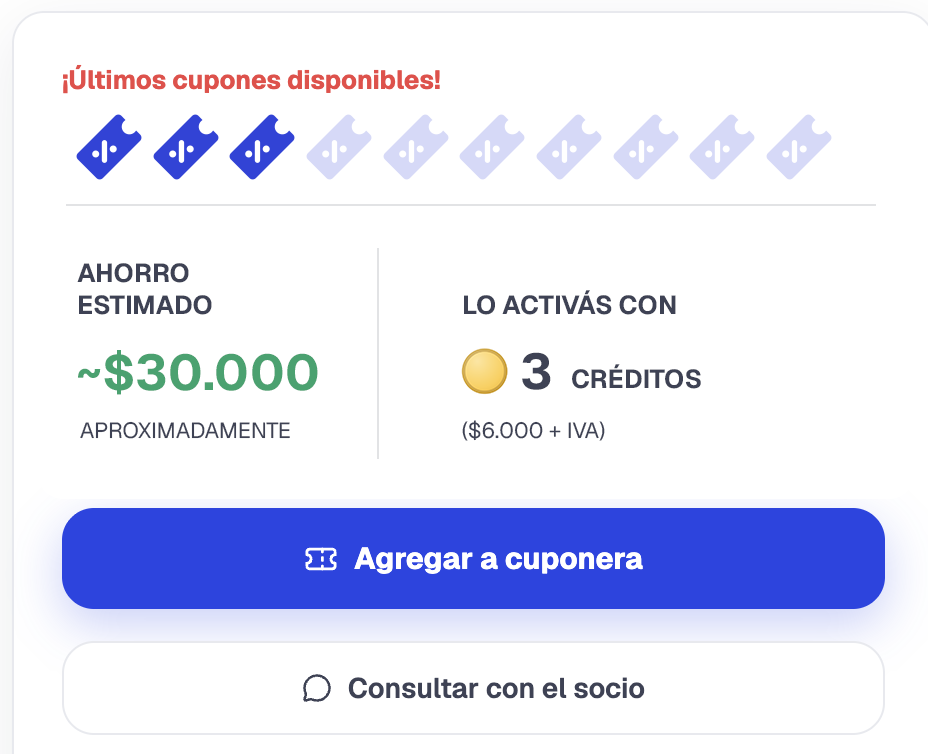
<style>
.page{position:relative;width:928px;height:754px;background:#ffffff}
.page>*{position:absolute;margin:0}
.t1{font:26px "Geist-Bold";color:#3e4254;text-transform:uppercase}
.t2{font:50px "Geist-Bold";color:#4ba170;text-transform:uppercase}
.t3{font:50px "Geist-Bold";color:#3e4254;text-transform:uppercase}
.t4{font:22px "Geist-Regular";color:#3e4254;text-transform:uppercase}
</style>
<div class="page">
<p class="t1" style="left:77px;top:263px;width:135px;height:52px">Ahorro<br>estimado</p>
<p class="t1" style="left:464px;top:290px;width:212px;height:25px">Lo activás con</p>
<p class="t2" style="left:78px;top:350px;width:240px;height:45px">~$30.000</p>
<p class="t3" style="left:522px;top:352px;width:29px;height:38px">3</p>
<p class="t1" style="left:572px;top:364px;width:129px;height:25px">créditos</p>
<p class="t4" style="left:80px;top:421px;width:210px;height:18px">APROXIMADAMENTE</p>
<p class="t4" style="left:462px;top:420px;width:143px;height:21px">($6.000 + IVA)</p>
</div>
